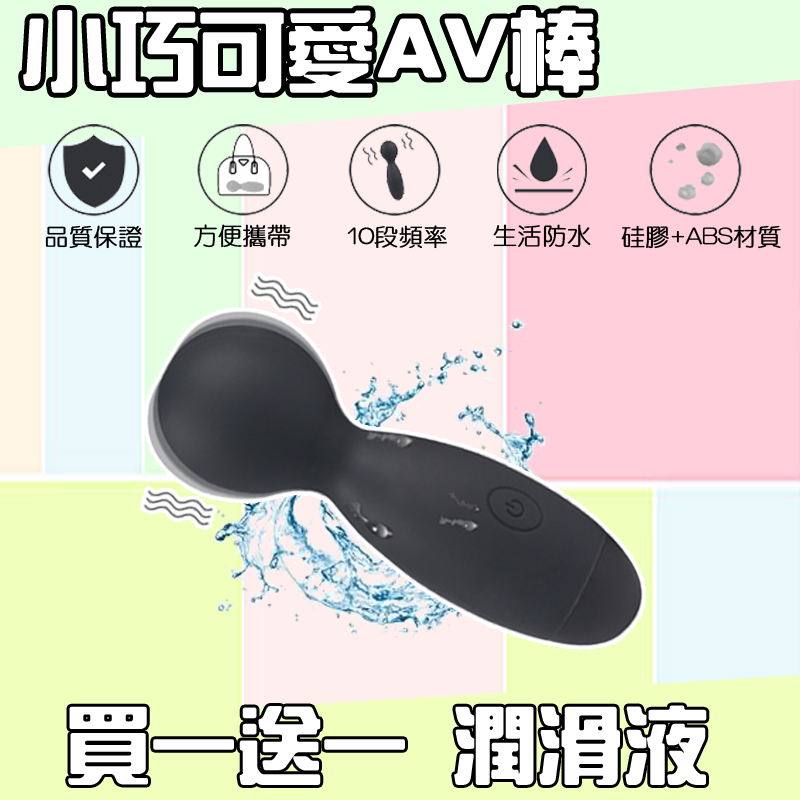
<style>
.page{position:relative;width:800px;height:800px}
.page>*{position:absolute;margin:0}
.t1{font:86.5px "HanWangZonYi";color:#ffffff;font-weight:bold}
.t2{font:24px "HanWangYenLight";color:#000000;font-weight:bold}
.t3{font:83.3px "HanWangZonYi";color:#ffffff;font-weight:bold}
</style>
<div class="page">
<p class="t1" style="left:23px;top:10px;width:572px;height:83px">小巧可愛AV棒</p>
<p class="t2" style="left:45px;top:225px;width:97px;height:24px">品質保證</p>
<p class="t2" style="left:194px;top:224px;width:97px;height:24px">方便攜帶</p>
<p class="t2" style="left:347px;top:225px;width:100px;height:24px">10段頻率</p>
<p class="t2" style="left:493px;top:224px;width:98px;height:24px">生活防水</p>
<p class="t2" style="left:621px;top:225px;width:160px;height:24px">硅膠+ABS材質</p>
<p class="t3" style="left:68px;top:705px;width:639px;height:80px">買一送一 潤滑液</p>
</div>
